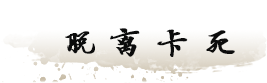
<style>
.page{position:relative;width:267px;height:83px;background:#ffffff}
.page>*{position:absolute;margin:0}
.t1{font:36px "HYYanRuiMinXingKaiW";color:#0c0c0c;font-weight:bold}
</style>
<div class="page">
<p class="t1" style="left:65px;top:28px;width:170px;height:29px">脱 离 卡 死</p>
</div>
